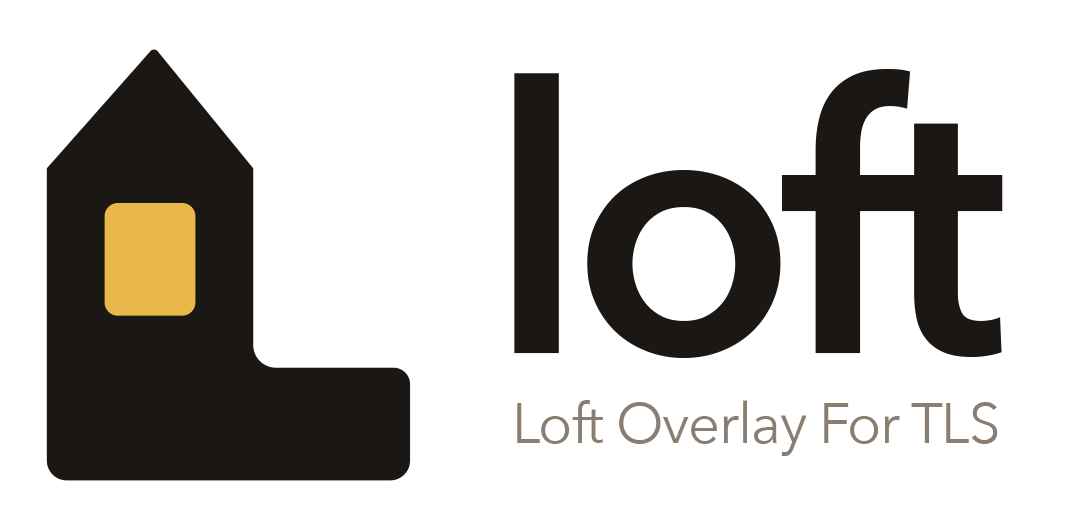
<style>
.page{position:relative;width:1092px;height:512px;background:#ffffff}
.page>*{position:absolute;margin:0}
.t1{font:370px "AvenirNext-DemiBold";letter-spacing:-0.04em;color:#1a1714}
.t2{font:56px "AvenirNext-Regular";letter-spacing:-0.02em;color:#8a7e72}
</style>
<div class="page">
<p class="t1" style="left:514px;top:69px;width:489px;height:289px">loft</p>
<p class="t2" style="left:517px;top:400px;width:481px;height:56px">Loft Overlay For TLS</p>
</div>
